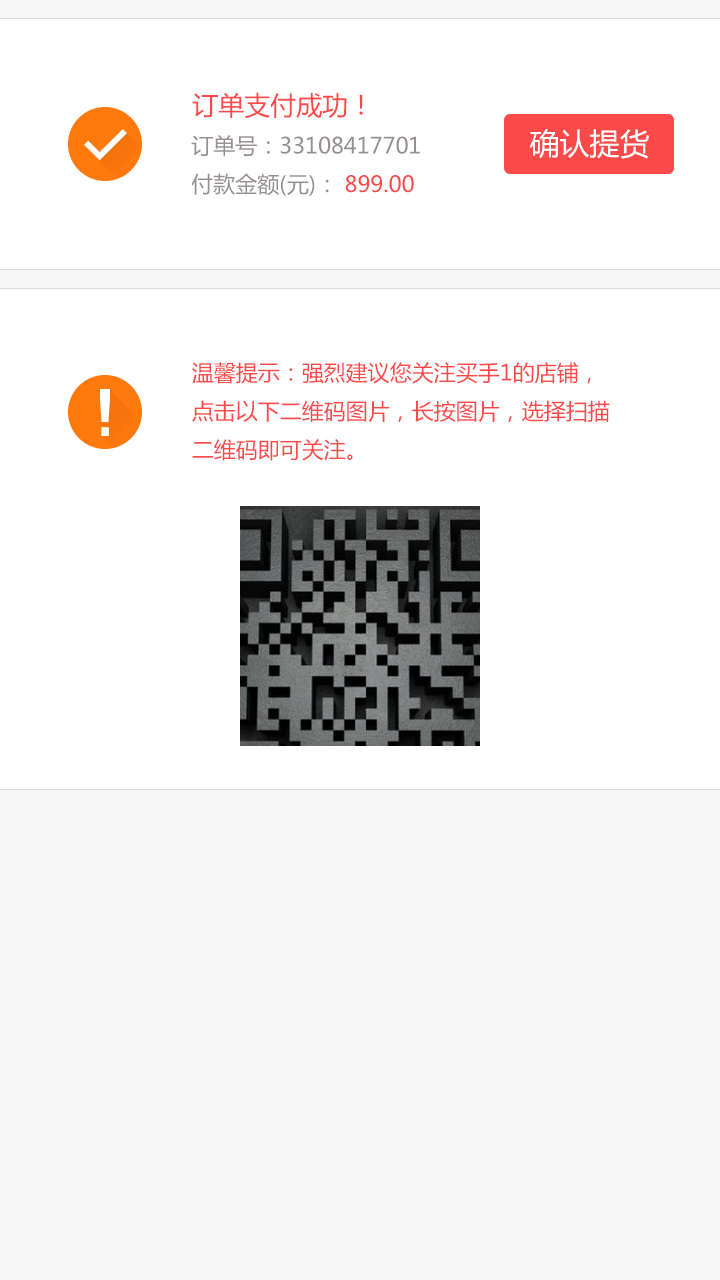
<style>
.page{position:relative;width:720px;height:1280px;background:#ffffff}
.page>*{position:absolute;margin:0}
.t1{font:26px "MicrosoftYaHei";color:#fc4a4a}
.t2{font:22px "MicrosoftYaHei";color:#958f93}
.t3{font:22px "MicrosoftYaHei";color:#fc4a4a}
.t4{font:30px "MicrosoftYaHei";color:#ffffff}
</style>
<div class="page">
<p class="t1" style="left:192px;top:92px;width:171px;height:27px">订单支付成功！</p>
<p class="t2" style="left:191px;top:135px;width:229px;height:61px">订单号：33108417701<br>付款金额(元)： <span class="t3">899.00</span></p>
<p class="t4" style="left:529px;top:129px;width:120px;height:30px">确认提货</p>
<p class="t3" style="left:192px;top:362px;width:418px;height:99px">温馨提示：强烈建议您关注买手1的店铺，<br>点击以下二维码图片，长按图片，选择扫描<br>二维码即可关注。</p>
</div>
